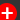
<style>
.page{position:relative;width:20px;height:20px;background:#ff0000}
.page>*{position:absolute;margin:0}
.t1{font:21.7px "Roboto-Regular";color:#ffffff}
</style>
<div class="page">
<p class="t1" style="left:1px;top:7px;width:12px;height:12px">+</p>
</div>
